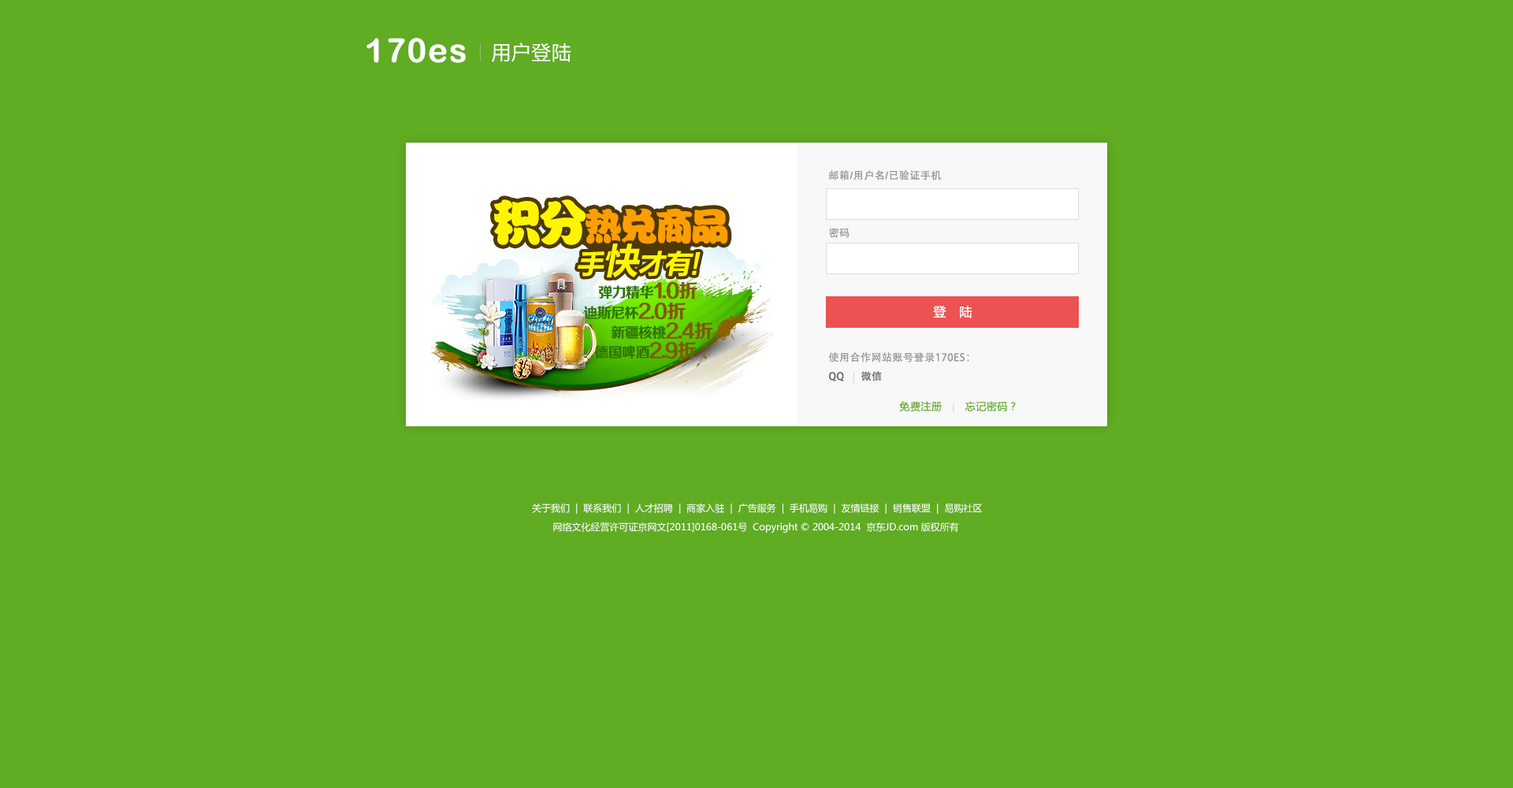
<style>
.page{position:relative;width:1513px;height:788px;background:#60ac22}
.page>*{position:absolute;margin:0}
.t1{font:33.3px "ArialRoundedMTBold";letter-spacing:0.04em;color:#ffffff}
.t2{font:19.4px "MicrosoftYaHei";letter-spacing:0.04em;color:#ffffff}
.t3{font:10.2px "AdobeHeitiStd-Regular";letter-spacing:0.04em;color:#999999}
.t4{font:10.2px "ArialRoundedMTBold";letter-spacing:0.04em;color:#999999}
.t5{font:12.6px "MicrosoftYaHei";letter-spacing:0.04em;color:#ffffff}
.t6{font:10.2px/18.9px "AdobeHeitiStd-Regular";letter-spacing:0.04em;color:#999999}
.t7{font:10.2px/18.9px "AdobeHeitiStd-Regular";letter-spacing:0.04em;color:#666666}
.t8{font:10.2px/18.9px "AdobeHeitiStd-Regular";letter-spacing:0.04em;color:#dddddd}
.t9{font:10.2px "MicrosoftYaHei";letter-spacing:0.04em;color:#60ac22}
.t10{font:7.9px "MicrosoftYaHei";letter-spacing:0.04em;color:#cccccc}
.t11{font:9.5px "MicrosoftYaHei";color:#ffffff}
</style>
<div class="page">
<p class="t1" style="left:366px;top:38px;width:100px;height:25px">170es</p>
<p class="t2" style="left:492px;top:43px;width:79px;height:19px">用户登陆</p>
<p class="t3" style="left:829px;top:170px;width:113px;height:10px">邮箱<span class="t4">/</span>用户名<span class="t4">/</span>已验证手机</p>
<p class="t3" style="left:829px;top:228px;width:21px;height:10px">密码</p>
<p class="t5" style="left:933px;top:306px;width:39px;height:12px">登   陆</p>
<p class="t6" style="left:828px;top:352px;width:141px;height:31px">使用合作网站账号登录170ES：<br><span class="t7">QQ   </span><span class="t8">|</span><span class="t7">  微信</span></p>
<p class="t9" style="left:899px;top:401px;width:117px;height:11px">免费注册   <span class="t10">|</span>   忘记密码？</p>
<p class="t11" style="left:532px;top:503px;width:450px;height:11px">关于我们  |  联系我们  |  人才招聘  |  商家入驻  |  广告服务  |  手机易购  |  友情链接  |  销售联盟  |  易购社区</p>
<p class="t11" style="left:553px;top:522px;width:406px;height:11px">网络文化经营许可证京网文[2011]0168-061号  Copyright © 2004-2014  京东JD.com 版权所有</p>
</div>
